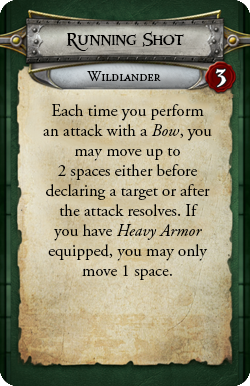
<style>
.page{position:relative;width:250px;height:386px}
.page>*{position:absolute;margin:0}
.t1{font:17px/20px "AGaramondPro-Regular";color:#000000}
.t2{font:17px/20px "AGaramondPro-Italic";color:#000000}
</style>
<div class="page">
<p class="t1" style="left:43px;top:104px;width:169px;height:176px;text-align:center">Each time you perform an attack with a <span class="t2">Bow</span>, you may move up to <br>2 spaces either before declaring a target or after the attack resolves. If <br>you have <span class="t2">Heavy Armor</span> equipped, you may only move 1 space.</p>
</div>
